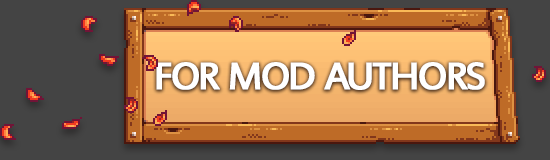
<style>
.page{position:relative;width:550px;height:160px;background:#444444}
.page>*{position:absolute;margin:0}
.t1{font:60px "EstrangeloEdessa";letter-spacing:-0.075em;color:#ffffff;font-variant:small-caps;font-weight:bold}
</style>
<div class="page">
<p class="t1" style="left:156px;top:62px;width:329px;height:28px">for mod authors</p>
</div>
